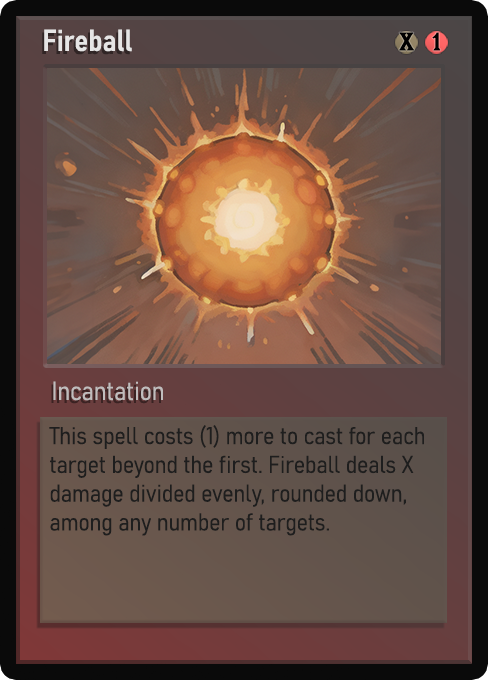
<style>
.page{position:relative;width:488px;height:680px}
.page>*{position:absolute;margin:0}
.t1{font:30px "Bahnschrift-SemiBoldSemiCondensed";color:#f2f2f2;font-weight:bold}
.t2{font:25px "WTRRoycroft";color:#000000;font-weight:bold;scale:1.09 1}
.t3{font:26px "Bahnschrift-LightSemiCondensed";color:#c8c8c8;font-weight:bold}
.t4{font:24px "Bahnschrift-LightSemiCondensed";color:#1e1e1e;font-weight:bold}
</style>
<div class="page">
<p class="t1" style="left:44px;top:29px;width:88px;height:23px;opacity:0.9">Fireball</p>
<p class="t2" style="left:399px;top:32px;width:15px;height:19px">X</p>
<p class="t2" style="left:432px;top:32px;width:9px;height:19px">1</p>
<p class="t3" style="left:53px;top:381px;width:110px;height:20px;opacity:0.9">Incantation</p>
<p class="t4" style="left:49px;top:425px;width:375px;height:111px">This spell costs (1) more to cast for each target beyond the first. Fireball deals X damage divided evenly, rounded down, among any number of targets.</p>
</div>
